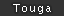
<style>
.page{position:relative;width:64px;height:16px;background:#333333}
.page>*{position:absolute;margin:0}
.t1{font:11px "LucidaSans";letter-spacing:0.1em;color:#ffffff}
</style>
<div class="page">
<p class="t1" style="left:13px;top:4px;width:38px;height:10px">Touga</p>
</div>
